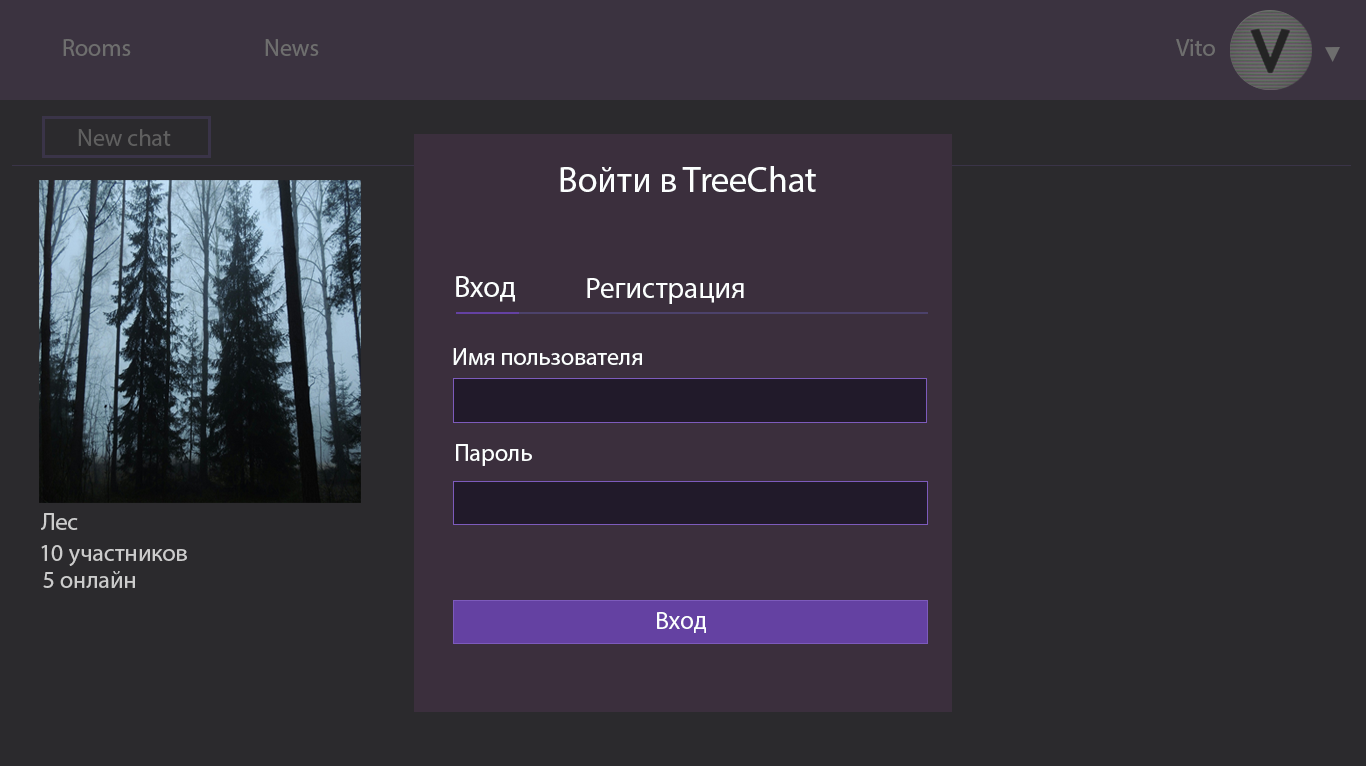
<style>
.page{position:relative;width:1366px;height:766px;background:#2b2a2d}
.page>*{position:absolute;margin:0}
.t1{font:24px "MyriadPro-Regular";color:#6e6e6e}
.t2{font:36px "MyriadPro-Regular";color:#fcffff}
.t3{font:30.1px "MyriadPro-Regular";color:#fcffff}
.t4{font:29.4px "MyriadPro-Regular";color:#fcffff}
.t5{font:24px "MyriadPro-Regular";color:#fcffff}
.t6{font:24px "MyriadPro-Regular";color:#cccccc}
.t7{font:25.3px "MyriadPro-Regular";color:#fcffff}
</style>
<div class="page">
<p class="t1" style="left:63px;top:39px;width:68px;height:17px">Rooms</p>
<p class="t1" style="left:265px;top:39px;width:54px;height:17px">News</p>
<p class="t1" style="left:1176px;top:39px;width:39px;height:17px">Vito</p>
<p class="t2" style="left:560px;top:166px;width:256px;height:26px">Войти в TreeChat</p>
<p class="t3" style="left:456px;top:276px;width:59px;height:26px">Вход</p>
<p class="t4" style="left:587px;top:278px;width:157px;height:26px">Регистрация</p>
<p class="t5" style="left:453px;top:348px;width:189px;height:17px">Имя пользователя</p>
<p class="t5" style="left:456px;top:444px;width:76px;height:22px">Пароль</p>
<p class="t6" style="left:41px;top:513px;width:37px;height:17px">Лес</p>
<p class="t6" style="left:41px;top:545px;width:146px;height:21px">10 участников</p>
<p class="t6" style="left:43px;top:571px;width:92px;height:17px">5 онлайн</p>
<p class="t7" style="left:657px;top:612px;width:49px;height:21px">Вход</p>
</div>
